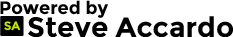
<style>
.page{position:relative;width:233px;height:37px;background:#ffffff}
.page>*{position:absolute;margin:0}
.t1{font:18px "Montserrat-Bold";color:#000000}
.t2{font:28px "Montserrat-Bold";color:#000000}
.t3{font:12px "Montserrat-Bold";color:#c3e902}
</style>
<div class="page">
<p class="t1" style="left:0px;top:0px;width:108px;height:18px">Powered by</p>
<p class="t2" style="left:28px;top:16px;width:205px;height:22px">Steve Accardo</p>
<p class="t3" style="left:4px;top:21px;width:17px;height:10px">SA</p>
</div>
